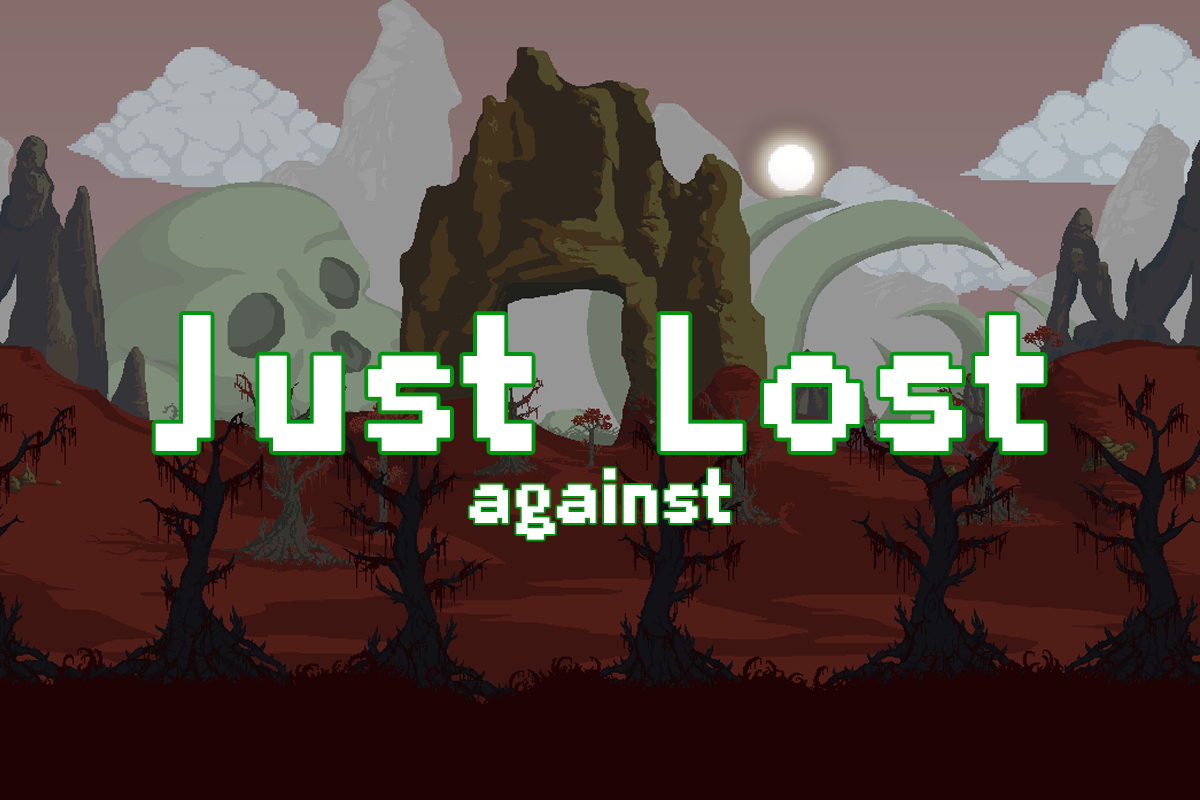
<style>
.page{position:relative;width:1200px;height:800px}
.page>*{position:absolute;margin:0}
.t1{font:200px "Planes_ValMore-Bold";color:#ffffff}
.t2{font:80px "Planes_ValMore-Bold";color:#ffffff}
</style>
<div class="page">
<p class="t1" style="left:155px;top:315px;width:889px;height:136px">Just Lost</p>
<p class="t2" style="left:469px;top:468px;width:261px;height:72px">against</p>
</div>
